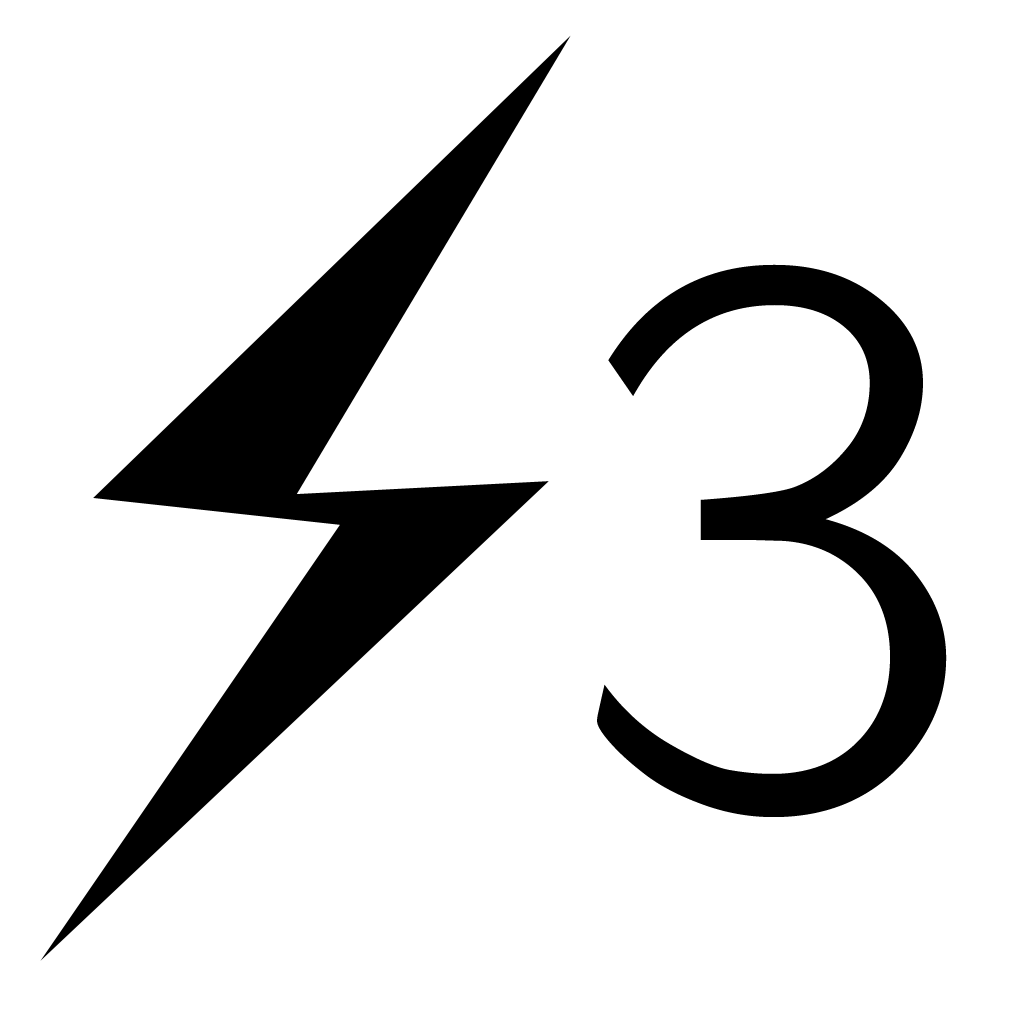
<style>
.page{position:relative;width:1024px;height:1024px;background:#ffffff}
.page>*{position:absolute;margin:0}
.t1{font:800px "CMUBright-Roman";color:#000000}
</style>
<div class="page">
<p class="t1" style="left:597px;top:264px;width:350px;height:553px">3</p>
</div>
